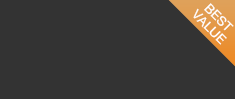
<style>
.page{position:relative;width:235px;height:99px;background:#333333}
.page>*{position:absolute;margin:0}
.t1{font:12.6px/13px "HelveticaNeue";color:#ffffff;text-transform:uppercase;scale:1.06 1}
</style>
<div class="page">
<p class="t1" style="left:193px;top:3px;width:41px;height:42px;text-align:center;rotate:45deg">Best<br>Value</p>
</div>
